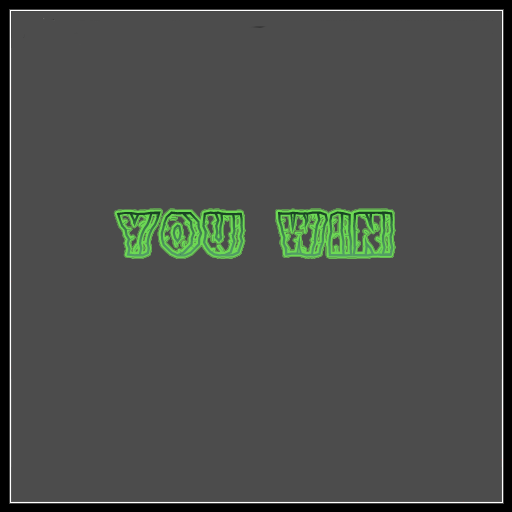
<style>
.page{position:relative;width:512px;height:512px;background:#4c4c4c}
.page>*{position:absolute;margin:0}
.t1{font:45px "RockFont"}
</style>
<div class="page">
<p class="t1" style="left:116px;top:211px;width:278px;height:46px">YOU      WIN</p>
</div>
